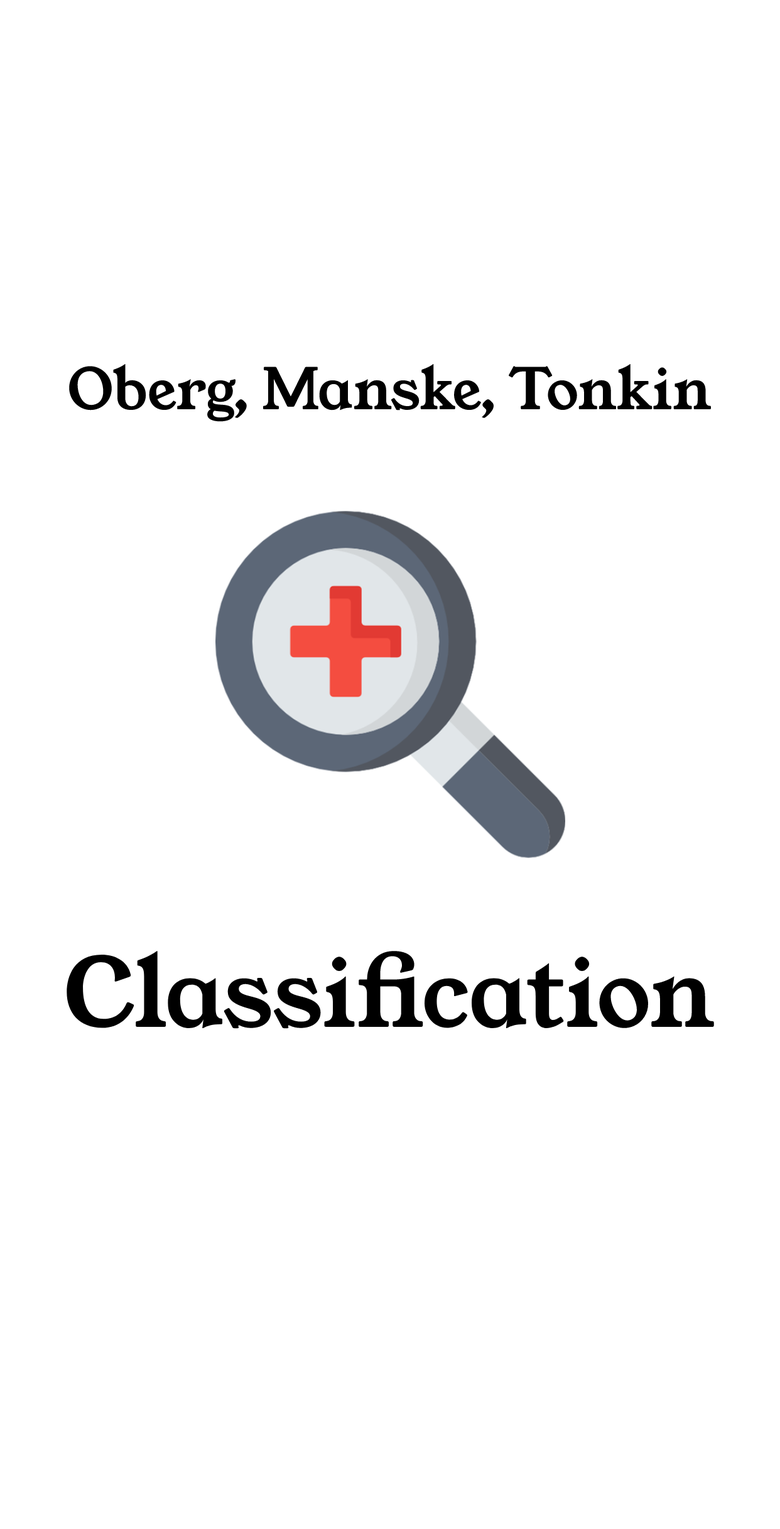
<style>
.page{position:relative;width:780px;height:1529px;background:#ffffff}
.page>*{position:absolute;margin:0}
.t1{font:56.5px "YoungSerif-Regular";color:#000000}
.t2{font:94.8px "YoungSerif-Regular";color:#000000}
</style>
<div class="page">
<p class="t1" style="left:69px;top:363px;width:642px;height:59px">Oberg, Manske, Tonkin</p>
<p class="t2" style="left:67px;top:951px;width:647px;height:78px">Classification</p>
</div>
